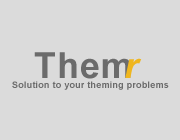
<style>
.page{position:relative;width:180px;height:140px;background:#dbdbdb}
.page>*{position:absolute;margin:0}
.t1{font:36px "Arial-BoldMT";letter-spacing:0.025em;color:#6b6b6b}
.t2{font:36px "Arial-BoldItalicMT";letter-spacing:0.025em;color:#efb61e}
.t3{font:9px "Arial-BoldMT";letter-spacing:0.025em;color:#6b6b6b}
</style>
<div class="page">
<p class="t1" style="left:34px;top:52px;width:97px;height:27px">Them</p>
<p class="t2" style="left:125px;top:58px;width:17px;height:20px">r</p>
<p class="t3" style="left:12px;top:81px;width:157px;height:9px">Solution to your theming problems</p>
</div>
